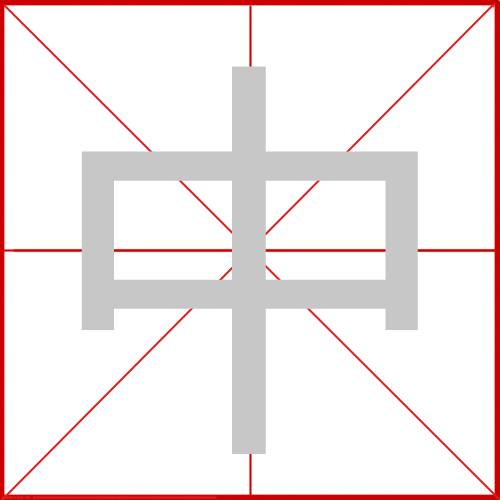
<style>
.page{position:relative;width:500px;height:500px;background:#ffffff}
.page>*{position:absolute;margin:0}
.t1{font:400px "MicrosoftYaHei";color:#c7c7c7}
</style>
<div class="page">
<p class="t1" style="left:81px;top:66px;width:337px;height:388px">中</p>
</div>
